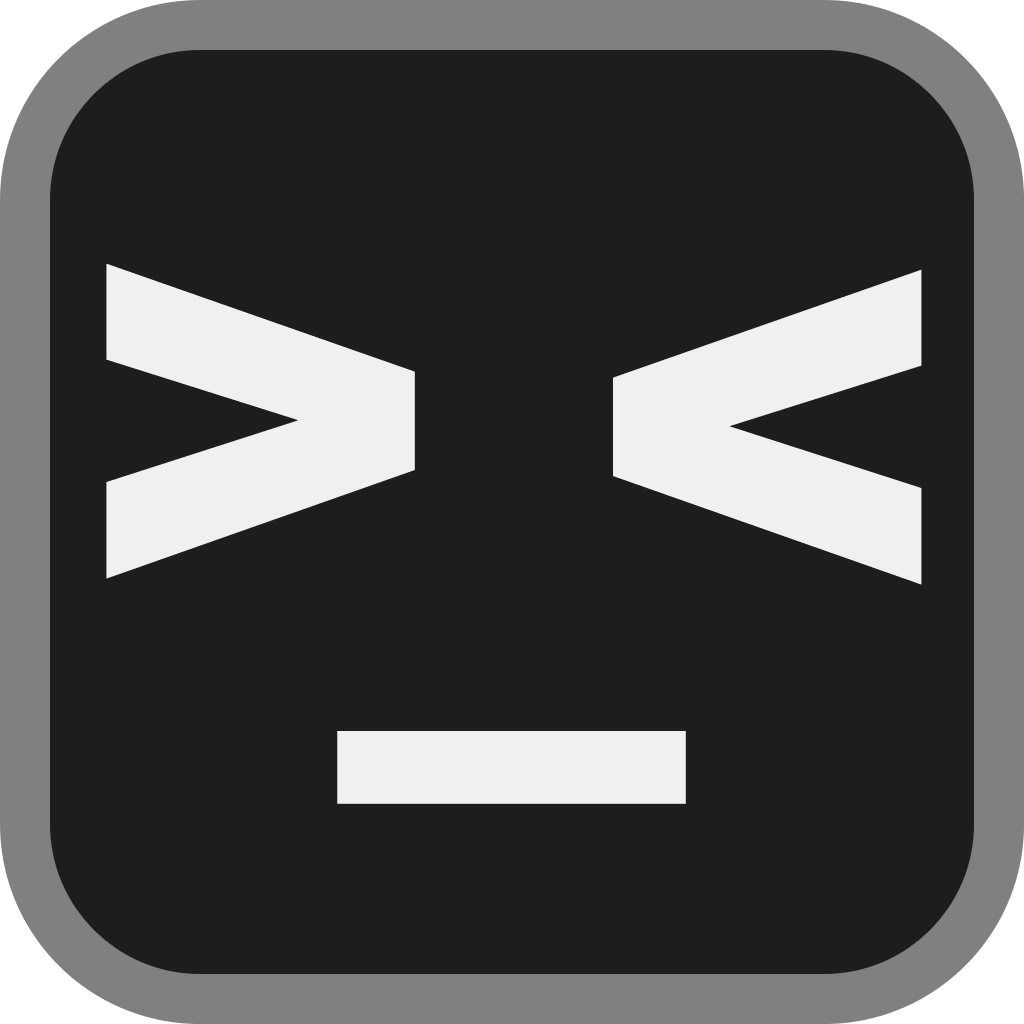
<style>
.page{position:relative;width:1024px;height:1024px;background:#1d1d1d}
.page>*{position:absolute;margin:0}
.t1{font:600px "AzeretMono-ExtraBold";color:#f0f0f0}
.t2{font:700px "AzeretMono-Medium";color:#f0f0f0}
</style>
<div class="page">
<p class="t1" style="left:106px;top:263px;width:309px;height:316px">&gt;</p>
<p class="t1" style="left:613px;top:269px;width:309px;height:316px">&lt;</p>
<p class="t2" style="left:337px;top:731px;width:349px;height:73px">_</p>
</div>
